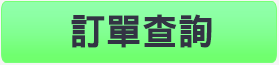
<style>
.page{position:relative;width:279px;height:65px}
.page>*{position:absolute;margin:0}
.t1{font:36.2px "DFNHei-W9-WIN-BF";color:#333344}
</style>
<div class="page">
<p class="t1" style="left:71px;top:14px;width:141px;height:34px">訂單查詢</p>
</div>
